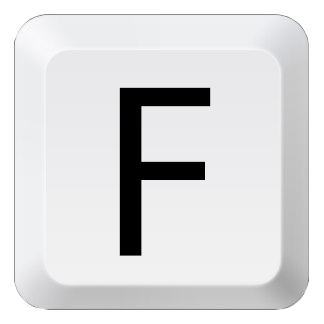
<style>
.page{position:relative;width:324px;height:324px}
.page>*{position:absolute;margin:0}
.t1{font:248.9px "MyriadPro-Regular";color:#000000}
</style>
<div class="page">
<p class="t1" style="left:119px;top:87px;width:92px;height:169px">F</p>
</div>
